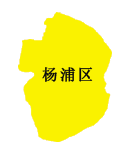
<style>
.page{position:relative;width:126px;height:153px;background:#ffffff}
.page>*{position:absolute;margin:0}
.t1{font:15.7px "NSimSun";letter-spacing:0.12em;color:#0c0c0c;font-weight:bold}
</style>
<div class="page">
<p class="t1" style="left:42px;top:67px;width:51px;height:15px">杨浦区</p>
</div>
